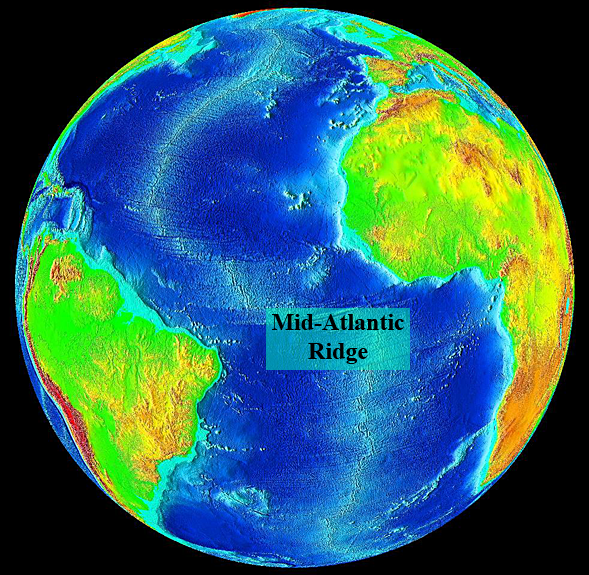
<style>
.page{position:relative;width:589px;height:575px;background:#000000}
.page>*{position:absolute;margin:0}
.t1{font:24px "TimesNewRomanPS-BoldMT";color:#000000}
</style>
<div class="page">
<p class="t1" style="left:272px;top:314px;width:132px;height:50px;text-align:center">Mid-Atlantic<br>Ridge</p>
</div>
